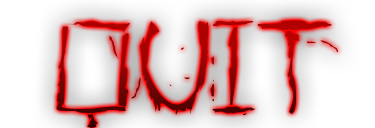
<style>
.page{position:relative;width:375px;height:128px}
.page>*{position:absolute;margin:0}
.t1{font:133.2px "AboutDead"}
</style>
<div class="page">
<p class="t1" style="left:56px;top:20px;width:283px;height:108px">Quit</p>
</div>
